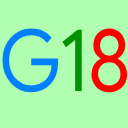
<style>
.page{position:relative;width:128px;height:128px;background:#b0ffb0}
.page>*{position:absolute;margin:0}
.t1{font:85.5px "GoogleSansFlex-Regular";color:#0080ff;scale:0.9 1}
.t2{font:85.5px "GoogleSansFlex-Regular";color:#009000;scale:0.9 1}
.t3{font:85.5px "GoogleSansFlex-Regular";color:#ff0000;scale:0.9 1}
</style>
<div class="page">
<p class="t1" style="left:2px;top:28px;width:126px;height:65px">G<span class="t2">1</span><span class="t3">8</span></p>
</div>
